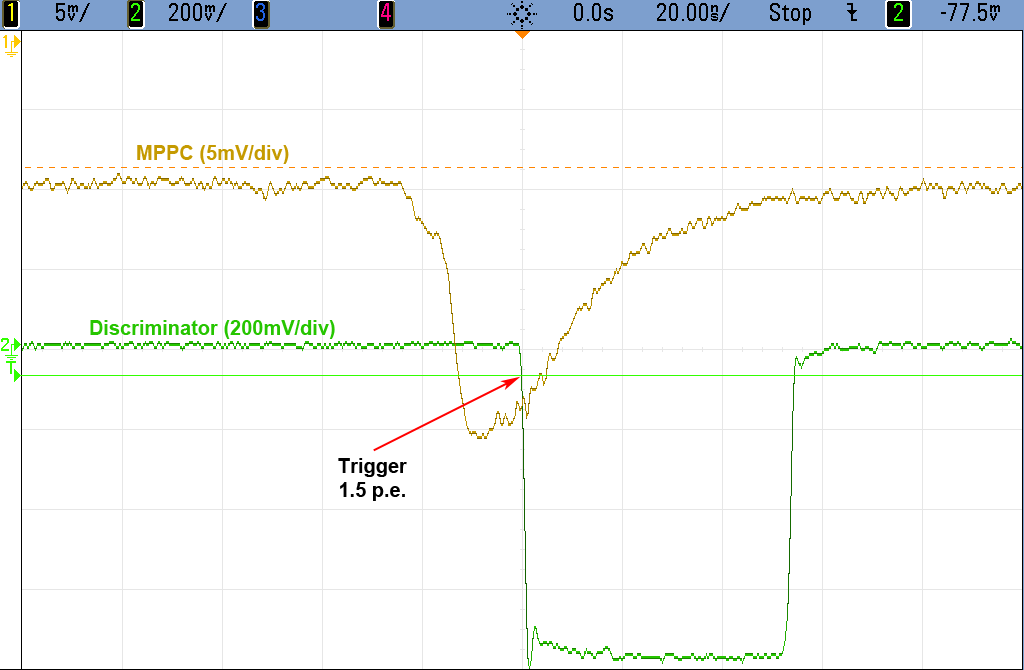
<style>
.page{position:relative;width:1024px;height:670px;background:#ffffff}
.page>*{position:absolute;margin:0}
.t1{font:20px "Arial-BoldMT";color:#c59a00}
.t2{font:20px "Arial-BoldMT";color:#26c500}
.t3{font:20px "Arial-BoldMT";color:#000000}
</style>
<div class="page">
<p class="t1" style="left:137px;top:145px;width:152px;height:19px">MPPC (5mV/div)</p>
<p class="t2" style="left:90px;top:320px;width:245px;height:19px">Discriminator (200mV/div)</p>
<p class="t3" style="left:338px;top:458px;width:69px;height:43px;text-align:center">Trigger<br>1.5 p.e.</p>
</div>
